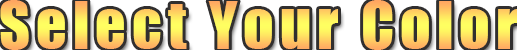
<style>
.page{position:relative;width:517px;height:50px}
.page>*{position:absolute;margin:0}
.t1{font:61.2px "Impact";letter-spacing:0.1em}
</style>
<div class="page">
<p class="t1" style="left:0px;top:0px;width:517px;height:50px">Select Your Color</p>
</div>
